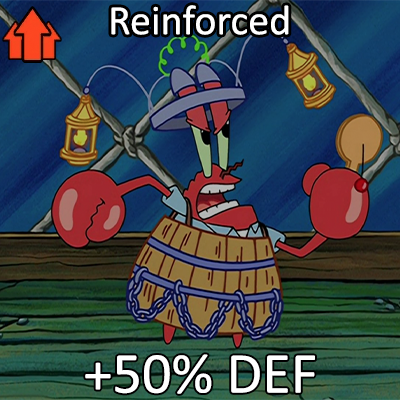
<style>
.page{position:relative;width:400px;height:400px}
.page>*{position:absolute;margin:0}
.t1{font:72px "Calibri";color:#ffffff}
.t2{font:100px "Calibri";color:#ffffff}
</style>
<div class="page">
<p class="t1" style="left:111px;top:5px;width:178px;height:30px">Reinforced</p>
<p class="t2" style="left:85px;top:354px;width:230px;height:40px">+50% DEF</p>
</div>
